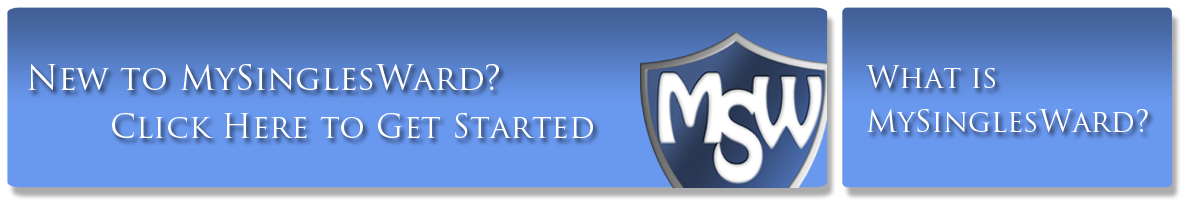
<style>
.page{position:relative;width:1191px;height:202px;background:#6998ef}
.page>*{position:absolute;margin:0}
.t1{font:33.9px "TrajanPro-Regular";color:#ffffff;font-variant:small-caps}
.t2{font:29.9px/44px "TrajanPro-Regular";color:#ffffff;font-variant:small-caps}
.t3{font:32.3px "TrajanPro-Regular";color:#ffffff;font-variant:small-caps}
</style>
<div class="page">
<p class="t1" style="left:28px;top:63px;width:471px;height:28px">New to MySinglesWard?</p>
<p class="t2" style="left:866px;top:65px;width:282px;height:68px">What is<br>MySinglesWard?</p>
<p class="t3" style="left:112px;top:112px;width:481px;height:27px">Click Here to Get Started</p>
</div>
